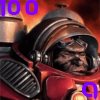
<style>
.page{position:relative;width:100px;height:100px}
.page>*{position:absolute;margin:0}
.t1{font:22px "StarcraftNormal";color:#8300fe}
</style>
<div class="page">
<p class="t1" style="left:0px;top:0px;width:39px;height:18px">100</p>
<p class="t1" style="left:82px;top:82px;width:16px;height:18px">Q</p>
</div>
